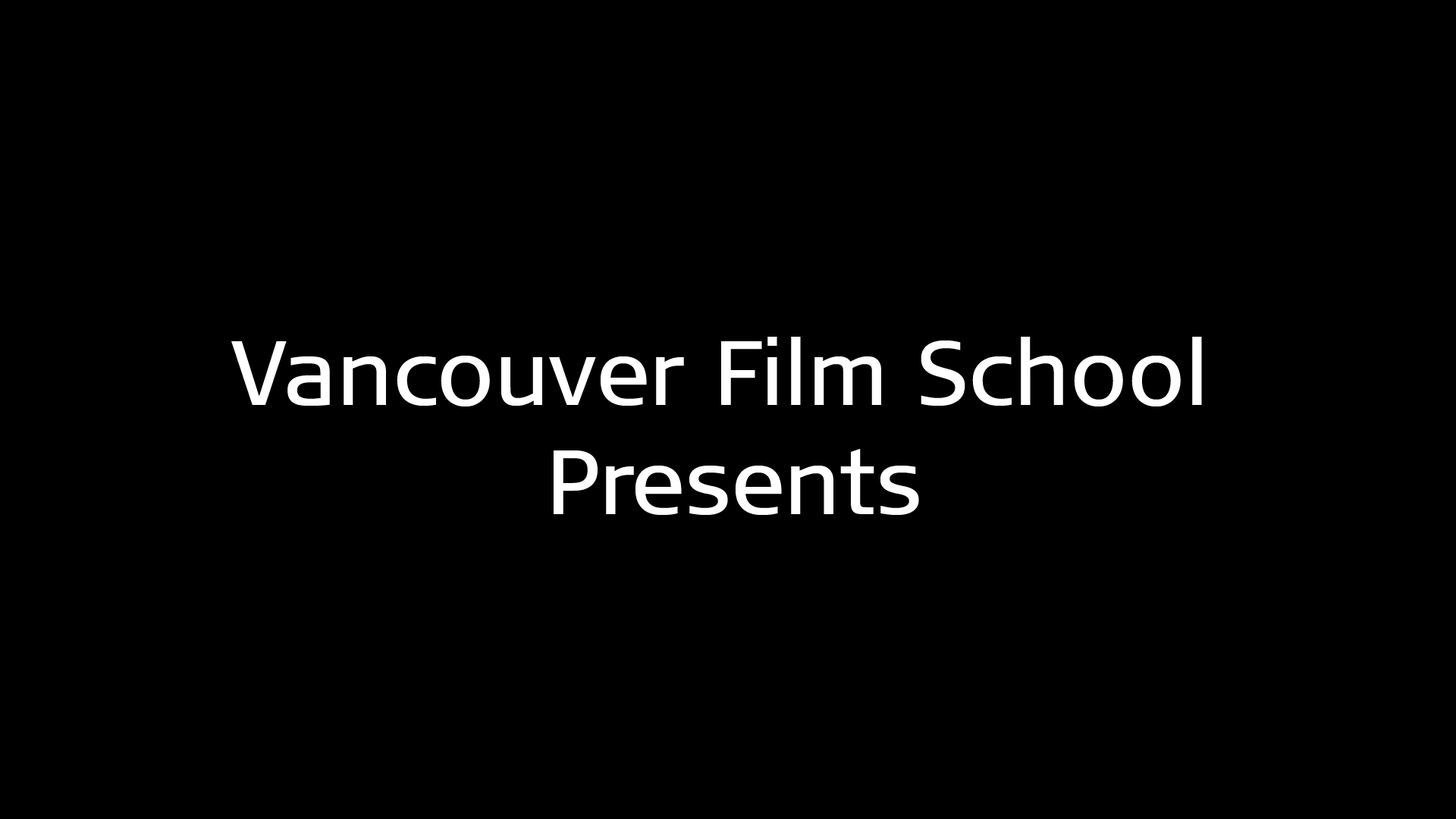
<style>
.page{position:relative;width:1456px;height:819px;background:#000000}
.page>*{position:absolute;margin:0}
.t1{font:91px "SignaNormal-Book";color:#ffffff}
</style>
<div class="page">
<p class="t1" style="left:231px;top:337px;width:971px;height:178px;text-align:center">Vancouver Film School <br>Presents</p>
</div>
